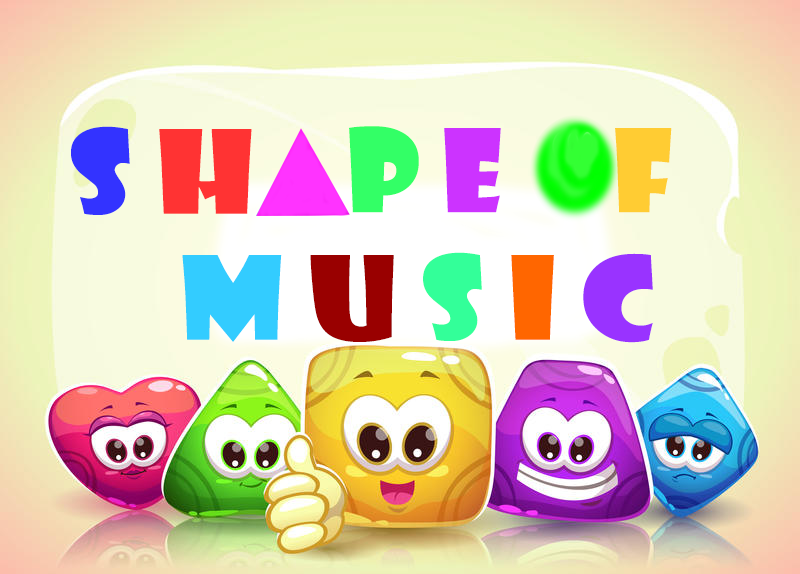
<style>
.page{position:relative;width:800px;height:574px}
.page>*{position:absolute;margin:0}
.t1{font:112.7px "ShowcardGothic-Reg";letter-spacing:0.2em;color:#3333ff;text-transform:uppercase;scale:1.11 1}
.t2{font:112.7px "ShowcardGothic-Reg";letter-spacing:0.2em;color:#ff3333;text-transform:uppercase;scale:1.11 1}
.t3{font:112.2px "ShowcardGothic-Reg";letter-spacing:0.2em;color:#33ff66;text-transform:uppercase}
.t4{font:112.2px "ShowcardGothic-Reg";letter-spacing:0.2em;color:#cc33ff;text-transform:uppercase}
.t5{font:112.2px "ShowcardGothic-Reg";letter-spacing:0.2em;color:#ffcc33;text-transform:uppercase}
.t6{font:112.8px "ShowcardGothic-Reg";letter-spacing:0.2em;color:#33ccff;text-transform:uppercase;scale:1.11 1}
.t7{font:112.8px "ShowcardGothic-Reg";letter-spacing:0.2em;color:#990000;text-transform:uppercase;scale:1.11 1}
.t8{font:112.8px "ShowcardGothic-Reg";letter-spacing:0.2em;color:#33ff99;text-transform:uppercase;scale:1.11 1}
.t9{font:112.8px "ShowcardGothic-Reg";letter-spacing:0.2em;color:#ff6600;text-transform:uppercase;scale:1.11 1}
.t10{font:112.8px "ShowcardGothic-Reg";letter-spacing:0.2em;color:#9933ff;text-transform:uppercase;scale:1.11 1}
</style>
<div class="page">
<p class="t1" style="left:71px;top:126px;width:181px;height:89px">s<span class="t2">h</span></p>
<p class="t3" style="left:349px;top:126px;width:323px;height:87px">p<span class="t4">e  </span><span class="t5">f</span></p>
<p class="t6" style="left:182px;top:252px;width:471px;height:91px">m<span class="t7">u</span><span class="t8">s</span><span class="t9">i</span><span class="t10">c</span></p>
</div>
